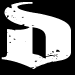
<style>
.page{position:relative;width:75px;height:75px;background:#000000}
.page>*{position:absolute;margin:0}
.t1{font:122.9px "Dirt2SoulStalker";color:#ffffff;scale:1.78 1}
</style>
<div class="page">
<p class="t1" style="left:1px;top:2px;width:70px;height:67px">D</p>
</div>
